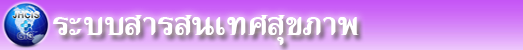
<style>
.page{position:relative;width:523px;height:50px}
.page>*{position:absolute;margin:0}
.t1{font:44px "DSNNamKang";color:#ffffff}
</style>
<div class="page">
<p class="t1" style="left:53px;top:15px;width:306px;height:30px">ระบบสารสนเทศสุขภาพ</p>
</div>
